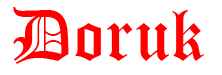
<style>
.page{position:relative;width:222px;height:75px;background:#ffffff}
.page>*{position:absolute;margin:0}
.t1{font:72px "OldEnglishTextMT";color:#ff0000}
</style>
<div class="page">
<p class="t1" style="left:13px;top:7px;width:191px;height:57px">Doruk</p>
</div>
